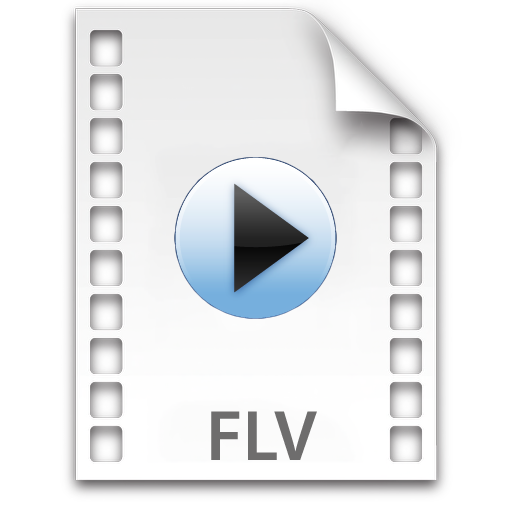
<style>
.page{position:relative;width:512px;height:512px;background:#ffffff}
.page>*{position:absolute;margin:0}
.t1{font:72px "MyriadPro-Semibold";color:#6e6d6d}
</style>
<div class="page">
<p class="t1" style="left:211px;top:411px;width:106px;height:49px">FLV</p>
</div>
